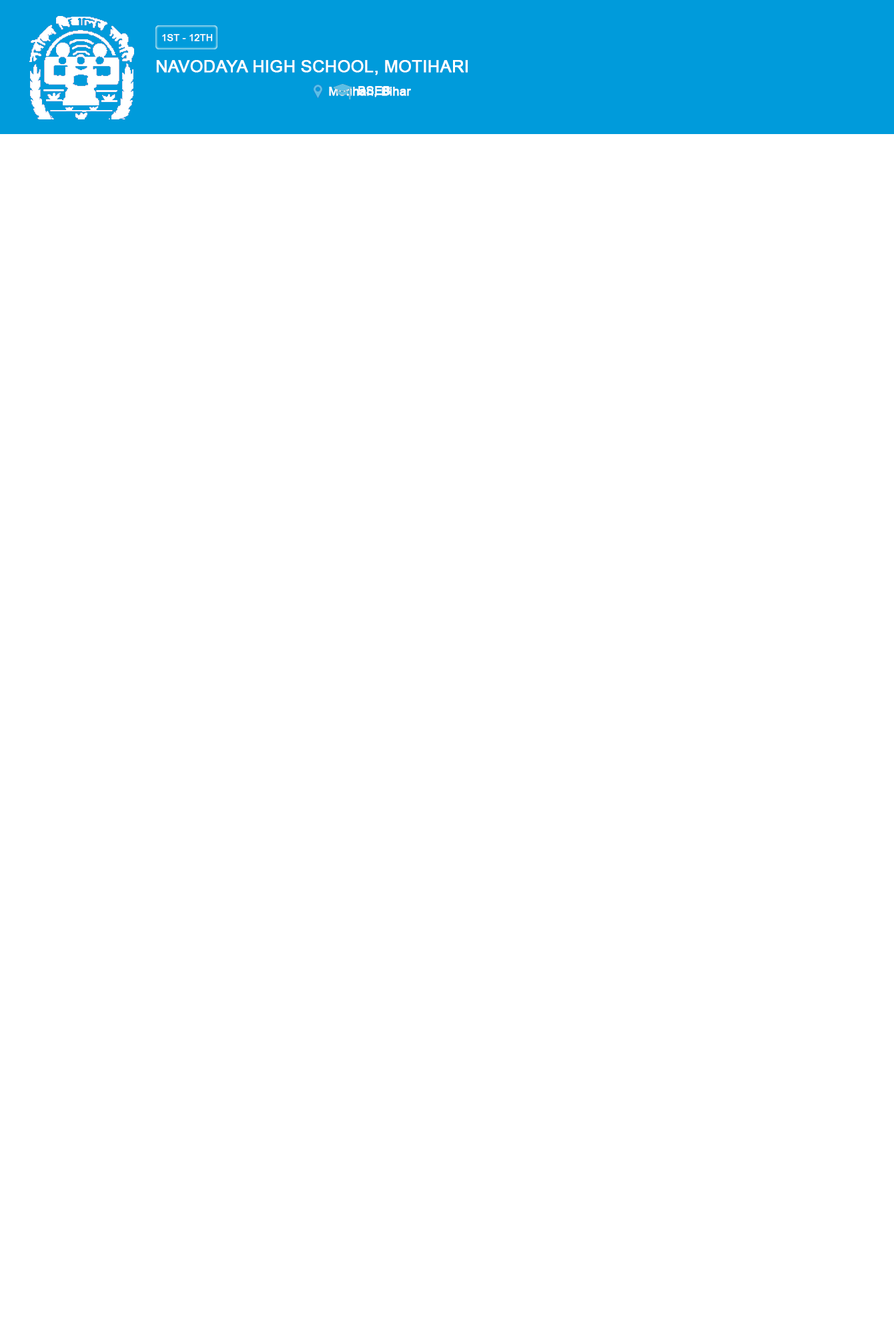
<style>
.page{position:relative;width:894px;height:1334px;background:#ffffff}
.page>*{position:absolute;margin:0}
.t1{font:9.6px "ArialMT";color:#ffffff;font-weight:bold}
.t2{font:16.7px "ArialMT";color:#ffffff;font-weight:bold}
.t3{font:12px "ArialMT";color:#ffffff;font-weight:bold}
</style>
<div class="page">
<p class="t1" style="left:162px;top:34px;width:51px;height:7px">1ST - 12TH</p>
<p class="t2" style="left:156px;top:60px;width:312px;height:15px">NAVODAYA HIGH SCHOOL, MOTIHARI</p>
<p class="t3" style="left:329px;top:87px;width:82px;height:10px">Motihari, Bihar</p>
<p class="t3" style="left:358px;top:86px;width:32px;height:9px">BSEB</p>
</div>
